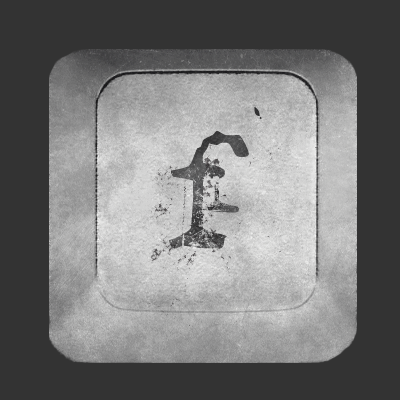
<style>
.page{position:relative;width:400px;height:400px;background:#333333}
.page>*{position:absolute;margin:0}
.t1{font:190.9px "1942report"}
</style>
<div class="page">
<p class="t1" style="left:169px;top:107px;width:93px;height:142px">f</p>
</div>
